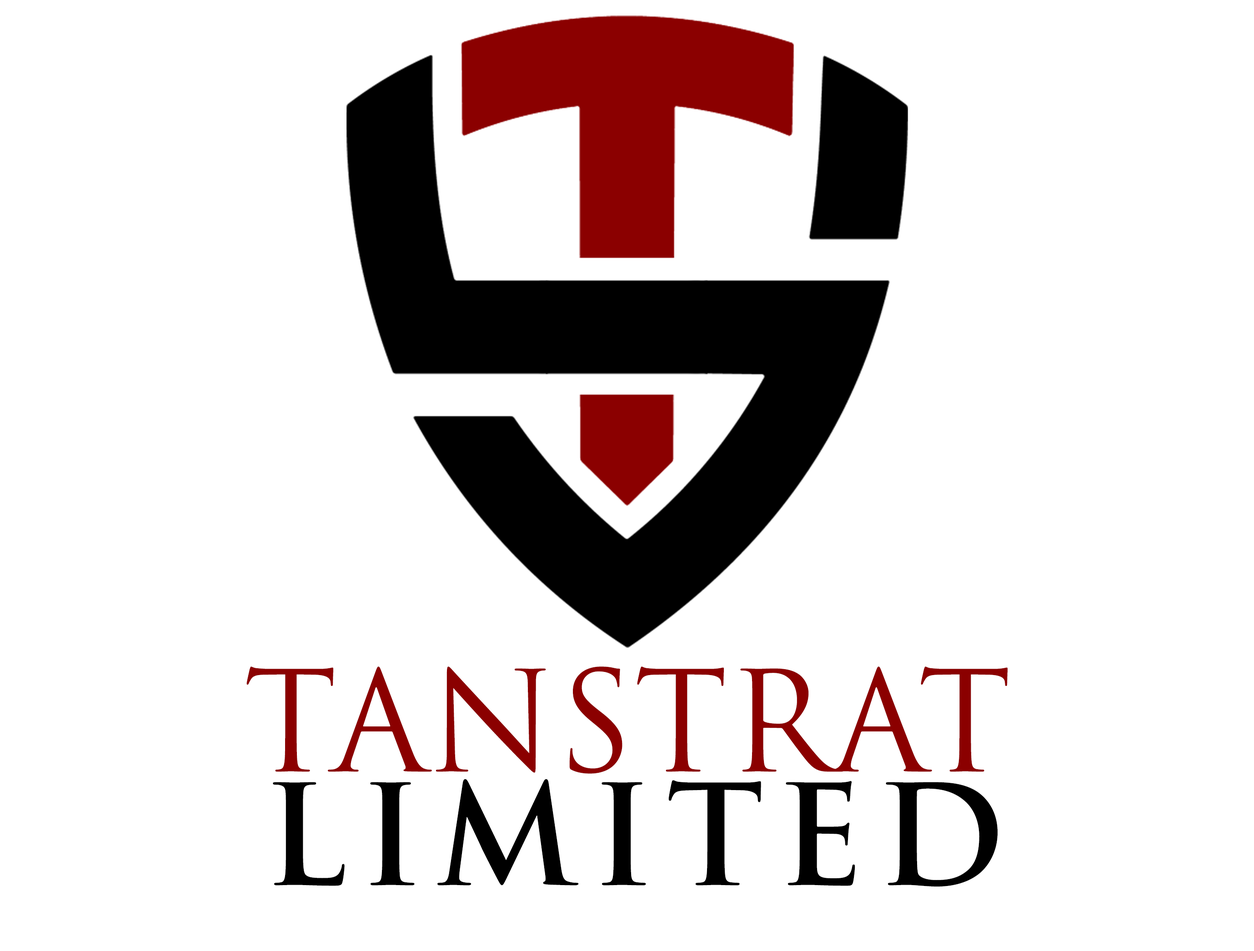
<style>
.page{position:relative;width:1254px;height:951px;background:#ffffff}
.page>*{position:absolute;margin:0}
.t1{font:136.4px/106.1px "TrajanPro-Regular";color:#8b0000}
.t2{font:136.4px/113.7px "TrajanPro-Bold";letter-spacing:0.1em;color:#000000}
</style>
<div class="page">
<p class="t1" style="left:246px;top:666px;width:761px;height:221px;text-align:center">TANSTRAT<br><span class="t2">LIMITED</span></p>
</div>
